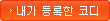
<style>
.page{position:relative;width:110px;height:21px}
.page>*{position:absolute;margin:0}
.t1{font:12px "morris9";color:#ffffff}
</style>
<div class="page">
<p class="t1" style="left:17px;top:6px;width:81px;height:10px">내가 등록한 코디</p>
</div>
